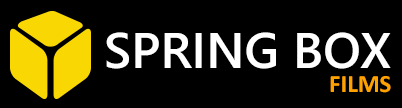
<style>
.page{position:relative;width:402px;height:108px;background:#000000}
.page>*{position:absolute;margin:0}
.t1{font:50px "WeblySleekUISemibold";color:#ffffff;text-transform:uppercase}
.t2{font:25px "Calibri-Bold";color:#ffa200;text-transform:uppercase}
</style>
<div class="page">
<p class="t1" style="left:106px;top:32px;width:285px;height:37px">Spring Box</p>
<p class="t2" style="left:330px;top:76px;width:61px;height:17px">Films</p>
</div>
